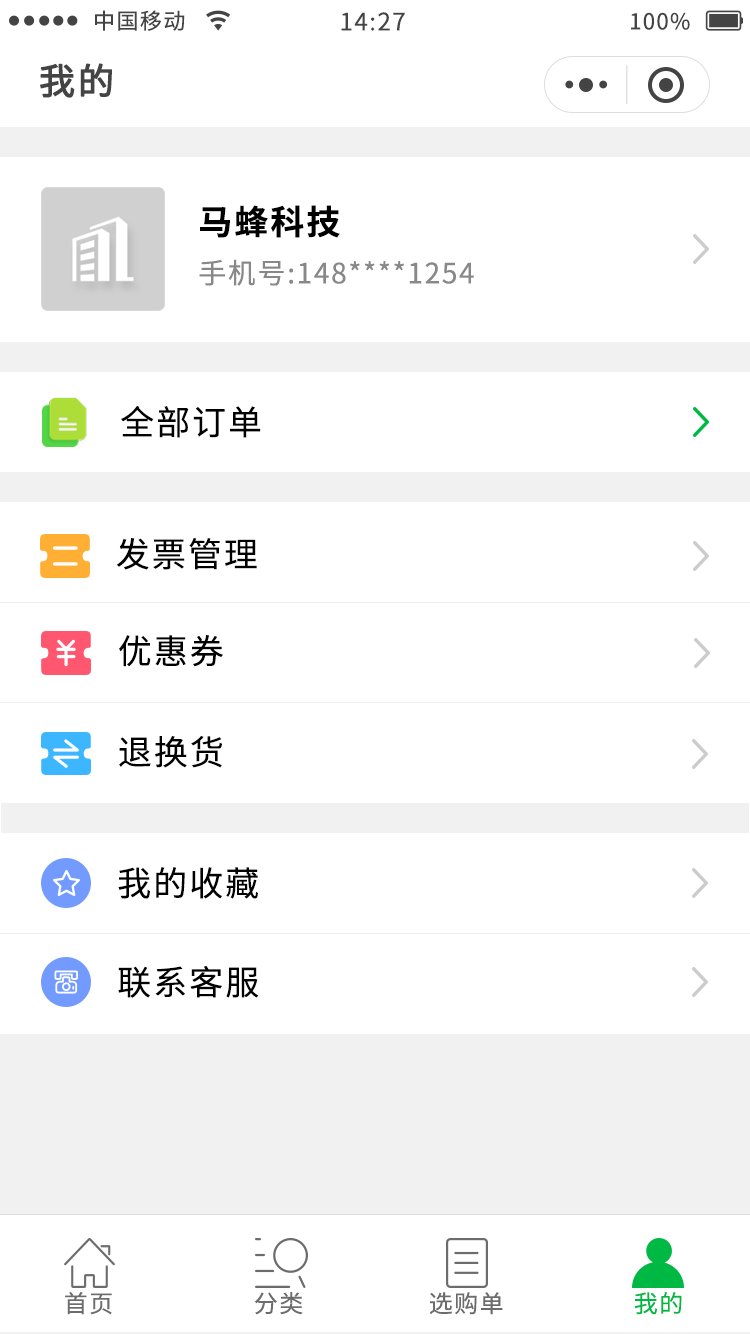
<style>
.page{position:relative;width:750px;height:1334px;background:#ffffff}
.page>*{position:absolute;margin:0}
.t1{font:22px "NotoSansCJKsc-Regular";letter-spacing:0.06em;color:#444444}
.t2{font:24px "NotoSansCJKsc-Regular";letter-spacing:0.06em;color:#444444}
.t3{font:36px "NotoSansCJKsc-Regular";letter-spacing:0.06em;color:#444444;font-weight:bold}
.t4{font:34px "NotoSansCJKsc-Bold";letter-spacing:0.06em;color:#000000}
.t5{font:28px "NotoSansCJKsc-Regular";letter-spacing:0.06em;color:#888888}
.t6{font:34px "NotoSansCJKsc-Regular";letter-spacing:0.06em;color:#000000}
.t7{font:24px "NotoSansCJKsc-Regular";letter-spacing:0.06em;color:#6c6c6c}
.t8{font:24px "NotoSansCJKsc-Regular";letter-spacing:0.06em;color:#00b945}
</style>
<div class="page">
<p class="t1" style="left:95px;top:10px;width:90px;height:21px">中国移动</p>
<p class="t2" style="left:341px;top:12px;width:64px;height:19px">14:27</p>
<p class="t1" style="left:631px;top:12px;width:59px;height:18px">100%</p>
<p class="t3" style="left:40px;top:63px;width:72px;height:35px">我的</p>
<p class="t4" style="left:200px;top:205px;width:140px;height:33px">马蜂科技</p>
<p class="t5" style="left:199px;top:259px;width:275px;height:27px">手机号:148****1254</p>
<p class="t6" style="left:121px;top:405px;width:140px;height:33px">全部订单</p>
<p class="t6" style="left:116px;top:538px;width:141px;height:32px">发票管理</p>
<p class="t6" style="left:119px;top:635px;width:104px;height:32px">优惠券</p>
<p class="t6" style="left:119px;top:736px;width:103px;height:32px">退换货</p>
<p class="t6" style="left:118px;top:867px;width:140px;height:32px">我的收藏</p>
<p class="t6" style="left:118px;top:966px;width:141px;height:32px">联系客服</p>
<p class="t7" style="left:65px;top:1292px;width:47px;height:23px">首页</p>
<p class="t7" style="left:254px;top:1292px;width:49px;height:23px">分类</p>
<p class="t7" style="left:429px;top:1292px;width:74px;height:23px">选购单</p>
<p class="t8" style="left:634px;top:1292px;width:48px;height:23px">我的</p>
</div>
